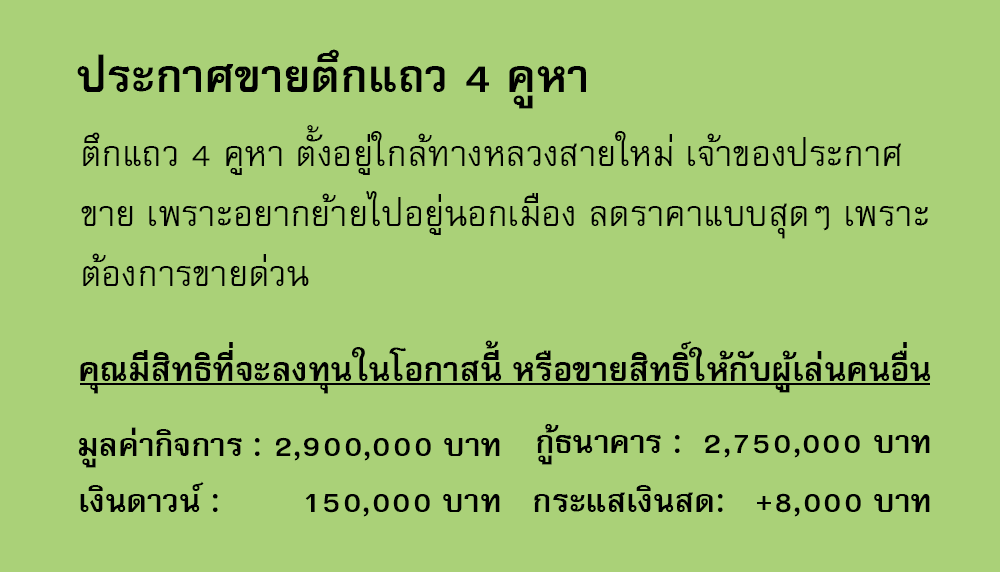
<style>
.page{position:relative;width:1000px;height:572px;background:#aad178}
.page>*{position:absolute;margin:0}
.t1{font:64px "FreesiaUPCBold";color:#000000}
.t2{font:50px/60px "FreesiaUPC";color:#000000}
.t3{font:47px "FreesiaUPCBold";color:#000000}
.t4{font:45px "FreesiaUPCBold";color:#000000}
</style>
<div class="page">
<p class="t1" style="left:77px;top:49px;width:509px;height:60px">ประกาศขายตึกแถว 4 คูหา</p>
<p class="t2" style="left:81px;top:125px;width:847px;height:161px">ตึกแถว 4 คูหา ตั้งอยู่ใกล้ทางหลวงสายใหม่ เจ้าของประกาศ<br>ขาย เพราะอยากย้ายไปอยู่นอกเมือง ลดราคาแบบสุดๆ เพราะ<br>ต้องการขายด่วน</p>
<p class="t3" style="left:80px;top:340px;width:851px;height:54px">คุณมีสิทธิที่จะลงทุนในโอกาสนี้ หรือขายสิทธิ์ให้กับผู้เล่นคนอื่น</p>
<p class="t4" style="left:537px;top:424px;width:393px;height:41px">กู้ธนาคาร :  2,750,000 บาท</p>
<p class="t4" style="left:78px;top:427px;width:422px;height:41px">มูลค่ากิจการ : 2,900,000 บาท</p>
<p class="t4" style="left:80px;top:481px;width:420px;height:36px">เงินดาวน์ :        150,000 บาท</p>
<p class="t4" style="left:534px;top:485px;width:396px;height:32px">กระแสเงินสด:   +8,000 บาท</p>
</div>
